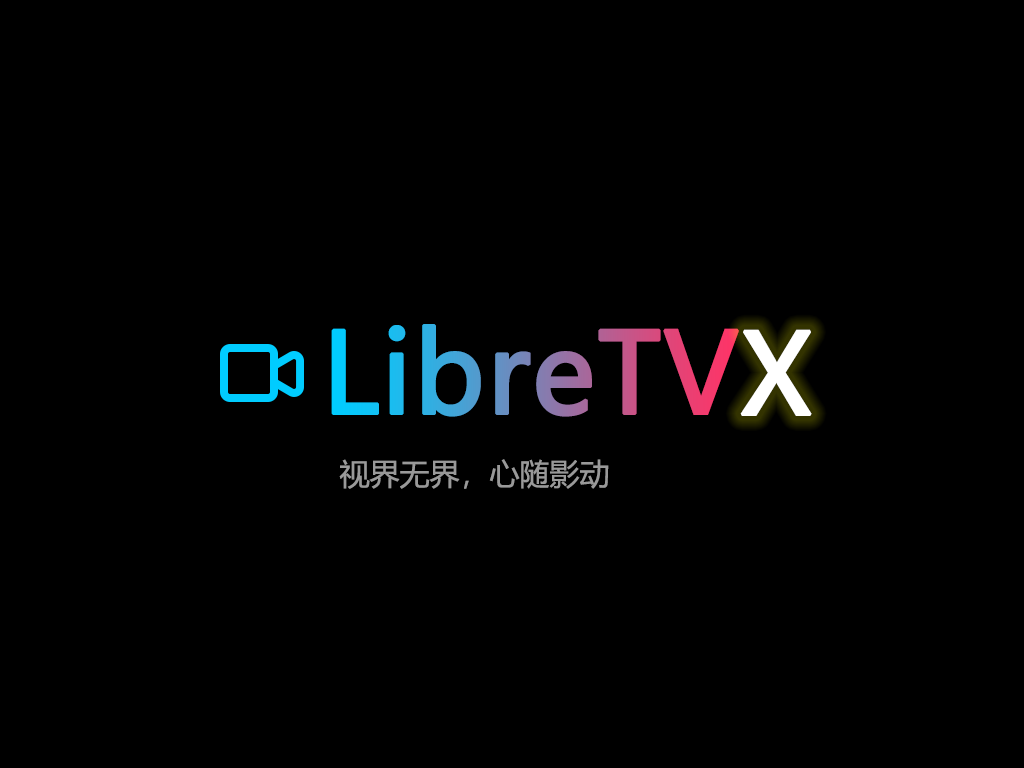
<style>
.page{position:relative;width:1024px;height:768px;background:#000000}
.page>*{position:absolute;margin:0}
.t1{font:110px "MicrosoftYaHei";font-weight:bold}
.t2{font:110px "MicrosoftYaHei";color:#ffffff;font-weight:bold}
.t3{font:30px "MicrosoftYaHei";color:#999999}
</style>
<div class="page">
<p class="t1" style="left:331px;top:324px;width:408px;height:93px">LibreTV</p>
<p class="t2" style="left:740px;top:329px;width:72px;height:87px">X</p>
<p class="t3" style="left:339px;top:459px;width:270px;height:30px">视界无界，心随影动</p>
</div>
